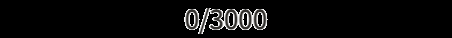
<style>
.page{position:relative;width:452px;height:38px;background:#000000}
.page>*{position:absolute;margin:0}
.t1{font:26px "WebPSD-18463539-0-Regular";color:#33312e;font-weight:bold}
</style>
<div class="page">
<p class="t1" style="left:0px;top:0px;width:452px;height:38px">0/3000</p>
</div>
